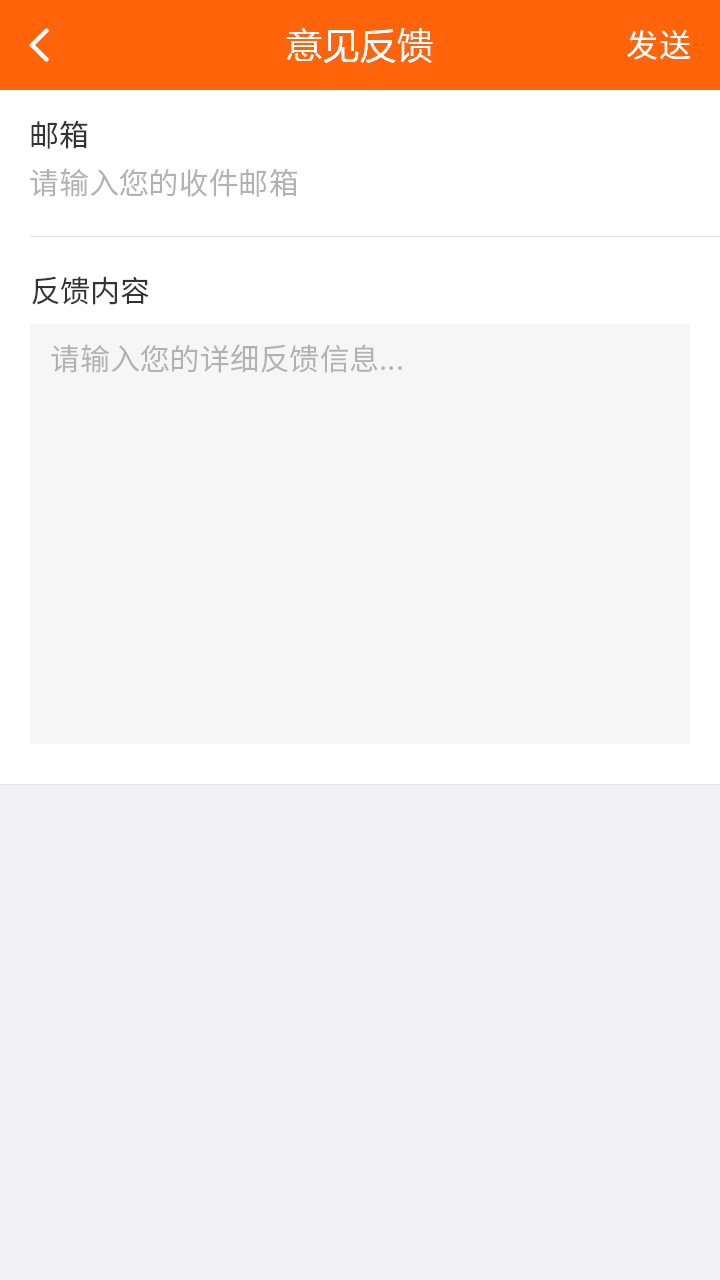
<style>
.page{position:relative;width:720px;height:1280px;background:#f2f2f5}
.page>*{position:absolute;margin:0}
.t1{font:36px "MicrosoftYaHei";letter-spacing:0.03em;color:#ffffff}
.t2{font:32px "NotoSansCJKsc-Regular";letter-spacing:0.03em;color:#ffffff;font-variant:small-caps}
.t3{font:30px "NotoSansCJKsc-DemiLight";color:#333333}
.t4{font:30px "NotoSansCJKsc-DemiLight";color:#b2b2b2}
</style>
<div class="page">
<p class="t1" style="left:286px;top:28px;width:147px;height:35px">意见反馈</p>
<p class="t2" style="left:627px;top:30px;width:64px;height:30px">发送</p>
<p class="t3" style="left:31px;top:120px;width:57px;height:29px">邮箱</p>
<p class="t4" style="left:30px;top:168px;width:267px;height:29px">请输入您的收件邮箱</p>
<p class="t3" style="left:32px;top:276px;width:117px;height:29px">反馈内容</p>
<p class="t4" style="left:51px;top:344px;width:351px;height:29px">请输入您的详细反馈信息...</p>
</div>
